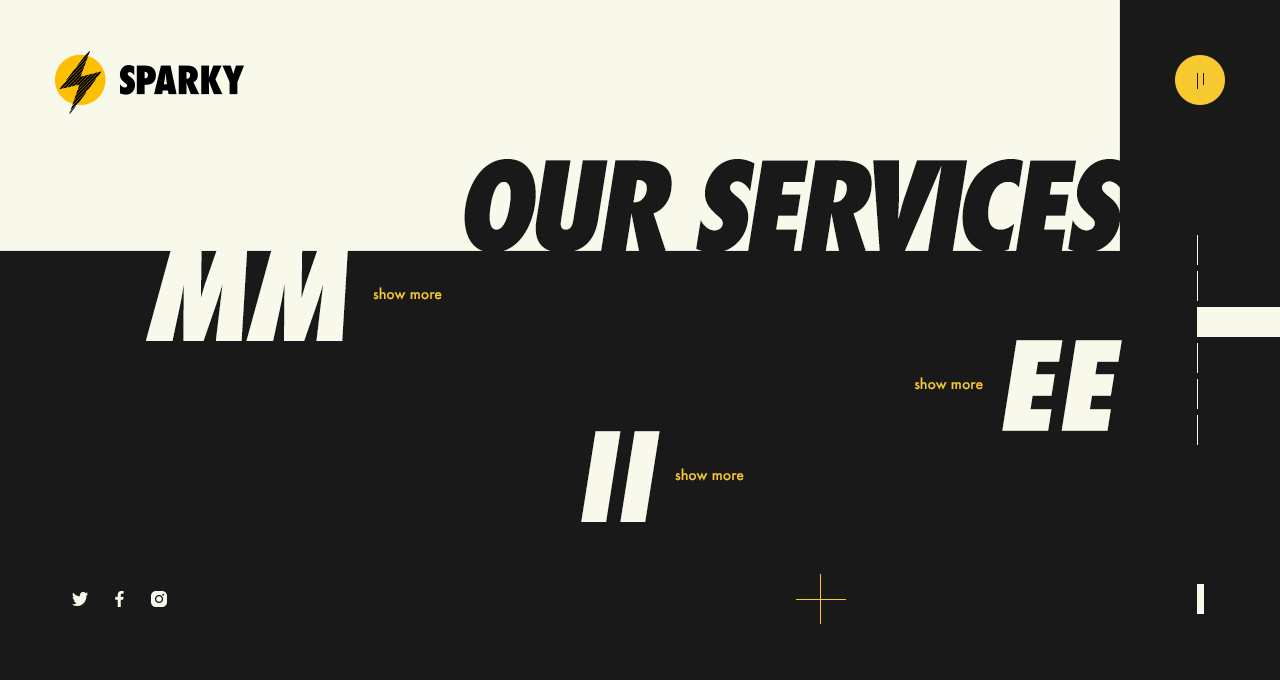
<style>
.page{position:relative;width:1280px;height:680px;background:#191919}
.page>*{position:absolute;margin:0}
.t1{font:120px "Futura-CondExtraBoldObl";letter-spacing:-0.05em;color:#191919;text-transform:uppercase}
.t2{font:120px "Futura-CondExtraBoldObl";color:#f8f8eb;text-transform:uppercase}
.t3{font:14px "Futura-Medium";color:#f6c930}
</style>
<div class="page">
<p class="t1" style="left:464px;top:159px;width:663px;height:94px">our services</p>
<p class="t2" style="left:146px;top:250px;width:202px;height:91px">mm</p>
<p class="t3" style="left:373px;top:287px;width:69px;height:13px">show more</p>
<p class="t2" style="left:1002px;top:340px;width:120px;height:91px">EE</p>
<p class="t3" style="left:914px;top:377px;width:69px;height:13px">show more</p>
<p class="t2" style="left:581px;top:431px;width:79px;height:91px">ii</p>
<p class="t3" style="left:675px;top:468px;width:69px;height:13px">show more</p>
</div>
